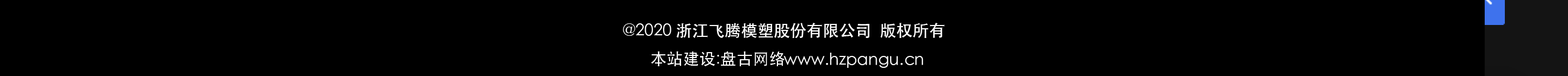
<style>
.page{position:relative;width:1568px;height:76px;background:#000000}
.page>*{position:absolute;margin:0}
.t1{font:16.3px "STHeiti";color:#ffffff}
</style>
<div class="page">
<p class="t1" style="left:623px;top:23px;width:322px;height:15px">@2020 浙江飞腾模塑股份有限公司  版权所有</p>
<p class="t1" style="left:783px;top:53px;width:140px;height:15px">www.hzpangu.cn</p>
</div>
